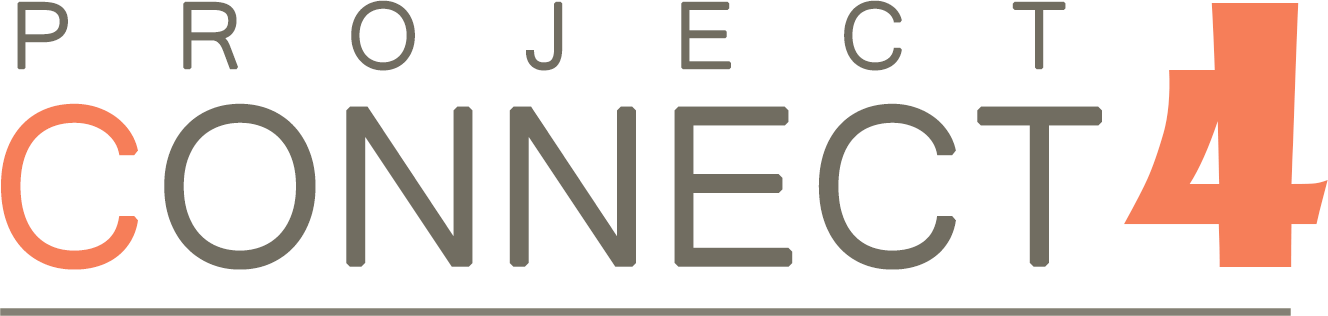
<style>
.page{position:relative;width:1328px;height:316px;background:#ffffff}
.page>*{position:absolute;margin:0}
.t1{font:119.8px "Microsoft-Yi-Baiti";letter-spacing:0.855em;color:#716d61;text-transform:uppercase;font-weight:bold}
.t2{font:352.1px "ShowcardGothic-Reg";color:#f67e59;text-transform:uppercase}
.t3{font:284.9px "Microsoft-Yi-Baiti";color:#716d61;text-transform:uppercase;font-weight:bold}
.t4{font:284.9px "Microsoft-Yi-Baiti";color:#f67e59;text-transform:uppercase;font-weight:bold}
</style>
<div class="page">
<p class="t1" style="left:17px;top:0px;width:1049px;height:71px">project</p>
<p class="t2" style="left:1124px;top:3px;width:204px;height:264px">4</p>
<p class="t3" style="left:1px;top:103px;width:1101px;height:167px"><span class="t4">c</span>onnect</p>
</div>
